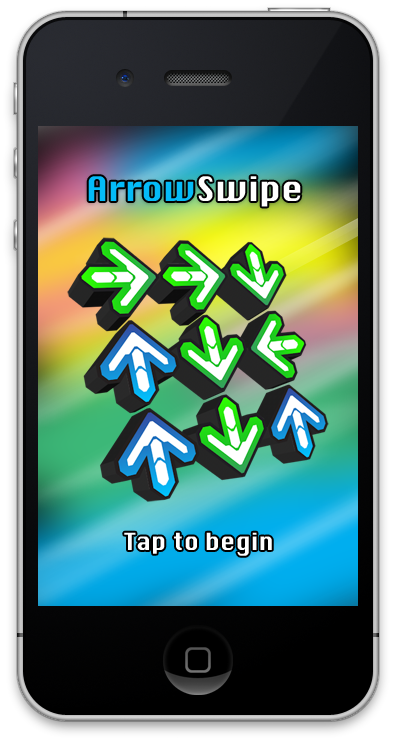
<style>
.page{position:relative;width:396px;height:744px}
.page>*{position:absolute;margin:0}
.t1{font:33px "Silom";color:#04bbf8}
.t2{font:33px "Silom";color:#ffffff}
.t3{font:23px "Silom";color:#ffffff}
</style>
<div class="page">
<p class="t1" style="left:88px;top:176px;width:213px;height:31px">Arrow<span class="t2">Swipe</span></p>
<p class="t3" style="left:124px;top:532px;width:148px;height:24px">Tap to begin</p>
</div>
